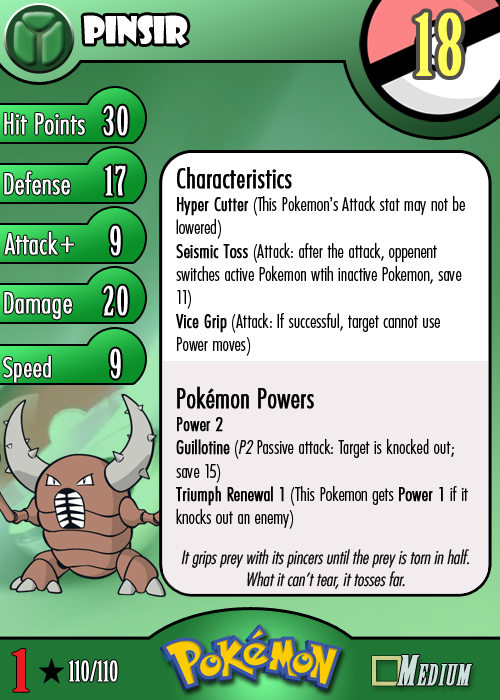
<style>
.page{position:relative;width:500px;height:700px}
.page>*{position:absolute;margin:0}
.t1{font:36.7px "ShowcardGothic-Reg";letter-spacing:-0.025em;color:#ffffff;scale:0.91 1}
.t2{font:83.3px "BirchStd";letter-spacing:0.025em;color:#fffd59;font-weight:bold}
.t3{font:27.8px "Futura-CondensedLight";color:#ffffff;font-weight:bold}
.t4{font:38.9px "BirchStd";letter-spacing:0.035em;color:#ffffff;font-weight:bold}
.t5{font:19.4px "FuturaCondensedBQ-Light";color:#010101}
.t6{font:27.8px "FuturaCondensedBQ-Light";color:#010101;font-weight:bold}
.t7{font:19.4px "FuturaCondensedBQ-Light";color:#010101;font-weight:bold}
.t8{font:19.4px "FuturaCondensedBQ-Light";color:#010101;font-style:italic}
.t9{font:30.6px "Futura-CondensedLight";color:#ffffff;font-weight:bold}
.t10{font:27.8px "FuturaCondensedBQ-Light";color:#ffffff;font-weight:bold}
.t11{font:18.1px "Futura-CondensedLight";color:#010101;font-style:italic}
.t12{font:55.6px "BirchStd";color:#ed1c24;font-weight:bold;scale:1.5 1}
.t13{font:27.8px "BirchStd";color:#ffffff;font-weight:bold}
</style>
<div class="page">
<p class="t1" style="left:83px;top:15px;width:105px;height:31px">pinsir</p>
<p class="t2" style="left:415px;top:12px;width:47px;height:64px">18</p>
<p class="t3" style="left:4px;top:113px;width:81px;height:22px">Hit Points</p>
<p class="t4" style="left:103px;top:105px;width:25px;height:31px">30</p>
<p class="t3" style="left:4px;top:171px;width:66px;height:24px">Defense</p>
<p class="t4" style="left:105px;top:165px;width:21px;height:31px">17</p>
<p class="t5" style="left:176px;top:167px;width:292px;height:362px"><span class="t6">Characteristics<br></span><span class="t7">Hyper Cutter</span> (This Pokemon’s Attack stat may not be lowered)<br><span class="t7">Seismic Toss</span> (Attack: after the attack, oppenent switches active Pokemon wtih inactive Pokemon, save 11)<br><span class="t7">Vice Grip</span> (Attack: If successful, target cannot use Power moves)<br><br><span class="t6">Pokémon Powers<br></span><span class="t7">Power 2<br>Guillotine</span> (<span class="t8">P2</span> Passive attack: Target is knocked out; save 15)<br><span class="t7">Triumph Renewal 1</span> (This Pokemon gets <span class="t7">Power 1</span> if it knocks out an enemy)</p>
<p class="t3" style="left:4px;top:231px;width:54px;height:24px">Attack</p>
<p class="t4" style="left:110px;top:225px;width:11px;height:31px">9</p>
<p class="t9" style="left:60px;top:236px;width:14px;height:17px">+</p>
<p class="t3" style="left:4px;top:292px;width:68px;height:28px">Damage</p>
<p class="t4" style="left:103px;top:285px;width:25px;height:31px">20</p>
<p class="t4" style="left:110px;top:348px;width:11px;height:31px">9</p>
<p class="t10" style="left:3px;top:355px;width:48px;height:28px">Speed</p>
<p class="t11" style="left:181px;top:549px;width:289px;height:40px;text-align:center">It grips prey with its pincers until the prey is torn in half. What it can’t tear, it tosses far.</p>
<p class="t12" style="left:12px;top:649px;width:17px;height:43px">1</p>
<p class="t13" style="left:68px;top:660px;width:50px;height:22px">110/110</p>
</div>
